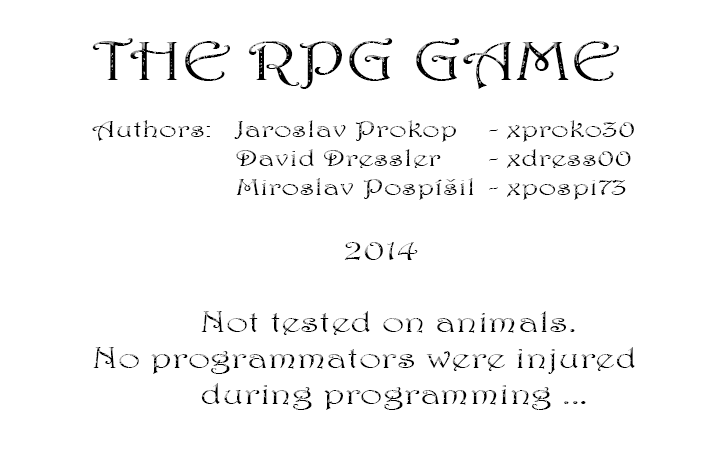
<style>
.page{position:relative;width:722px;height:470px;background:#ffffff}
.page>*{position:absolute;margin:0}
.t1{font:24px "Harrington";color:#000000;scale:1.31 1}
.t2{font:55.1px "Harrington";color:#000000;scale:1.31 1}
.t3{font:30px "Harrington";color:#000000;scale:1.31 1}
</style>
<div class="page">
<p class="t1" style="left:92px;top:38px;width:543px;height:372px"><span class="t2">THE RPG GAME<br></span><br>Authors: Jaroslav Prokop - xproko30<br>    David Dressler    - xdress00<br>    Miroslav Pospíšil - xpospi73<br><br>       <span class="t3">2014<br><br>   Not tested on animals.<br>No programmators were injured<br>   during programming ...</span></p>
</div>
